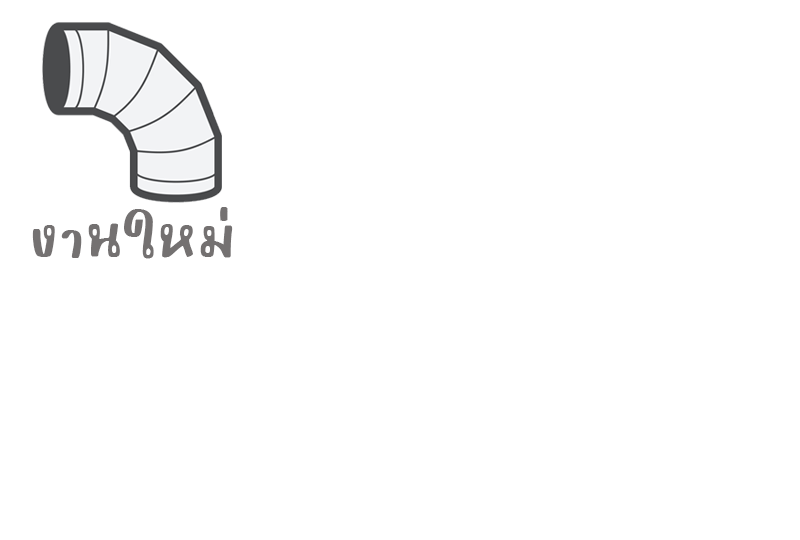
<style>
.page{position:relative;width:800px;height:540px;background:#ffffff}
.page>*{position:absolute;margin:0}
.t1{font:50px "JaoMatcha-Bold";letter-spacing:0.075em;color:#747171;text-transform:uppercase}
</style>
<div class="page">
<p class="t1" style="left:32px;top:207px;width:201px;height:52px">งานใหม่</p>
</div>
